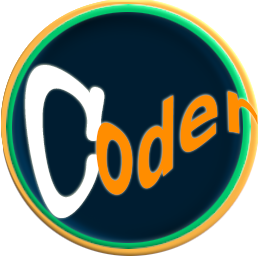
<style>
.page{position:relative;width:258px;height:256px;background:#ffffff}
.page>*{position:absolute;margin:0}
.t1{font:220.6px "AmericanTypewriter-Semibold";color:#ffffff;scale:0.5 1}
.t2{font:91.7px "Hack-Bold";color:#ff8e00;scale:0.77 1}
</style>
<div class="page">
<p class="t1" style="left:25px;top:65px;width:80px;height:153px">C</p>
<p class="t2" style="left:96px;top:91px;width:162px;height:104px">oder</p>
</div>
